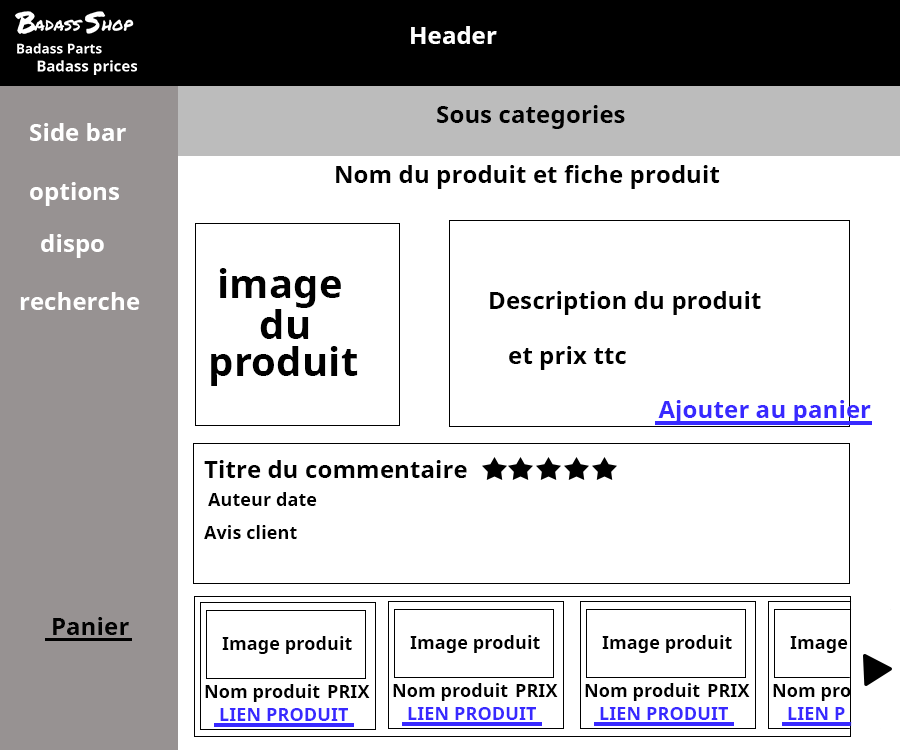
<style>
.page{position:relative;width:900px;height:750px;background:#ffffff}
.page>*{position:absolute;margin:0}
.t1{font:24px "NotoSans-Bold";letter-spacing:0.005em;color:#ffffff}
.t2{font:24px "NotoSans-Bold";letter-spacing:0.005em;color:#000000}
.t3{font:40px "NotoSans-Bold";letter-spacing:0.005em;color:#000000}
.t4{font:24px "NotoSans-Bold";letter-spacing:0.005em;color:#3829ff}
.t5{font:18px "NotoSans-Bold";letter-spacing:0.005em;color:#000000}
.t6{font:24px "NotoSans-Bold";letter-spacing:0.005em;color:#010101}
.t7{font:18px "NotoSans-Bold";letter-spacing:0.005em;color:#3829ff}
</style>
<div class="page">
<p class="t1" style="left:411px;top:26px;width:86px;height:18px">Header</p>
<p class="t2" style="left:437px;top:105px;width:188px;height:24px">Sous categories</p>
<p class="t1" style="left:30px;top:123px;width:96px;height:18px">Side bar</p>
<p class="t2" style="left:336px;top:165px;width:384px;height:24px">Nom du produit et fiche produit</p>
<p class="t1" style="left:30px;top:182px;width:89px;height:24px">options</p>
<p class="t1" style="left:41px;top:234px;width:63px;height:24px">dispo</p>
<p class="t3" style="left:219px;top:268px;width:122px;height:40px">image</p>
<p class="t2" style="left:490px;top:291px;width:271px;height:24px">Description du produit</p>
<p class="t3" style="left:260px;top:309px;width:49px;height:30px">du</p>
<p class="t3" style="left:211px;top:346px;width:147px;height:40px">produit</p>
<p class="t2" style="left:509px;top:346px;width:117px;height:24px">et prix ttc</p>
<p class="t4" style="left:658px;top:400px;width:213px;height:24px">Ajouter au panier</p>
<p class="t2" style="left:204px;top:460px;width:263px;height:18px">Titre du commentaire</p>
<p class="t5" style="left:208px;top:492px;width:109px;height:14px">Auteur date</p>
<p class="t5" style="left:204px;top:525px;width:93px;height:14px">Avis client</p>
<p class="t6" style="left:53px;top:617px;width:76px;height:18px">Panier</p>
<p class="t5" style="left:222px;top:636px;width:130px;height:18px">Image produit</p>
<p class="t5" style="left:410px;top:635px;width:130px;height:18px">Image produit</p>
<p class="t5" style="left:602px;top:635px;width:130px;height:18px">Image produit</p>
<p class="t5" style="left:790px;top:636px;width:58px;height:17px">Image</p>
<p class="t5" style="left:205px;top:684px;width:115px;height:18px">Nom produit</p>
<p class="t5" style="left:328px;top:685px;width:42px;height:13px">PRIX</p>
<p class="t5" style="left:393px;top:683px;width:115px;height:18px">Nom produit</p>
<p class="t5" style="left:516px;top:684px;width:42px;height:13px">PRIX</p>
<p class="t5" style="left:585px;top:683px;width:115px;height:18px">Nom produit</p>
<p class="t5" style="left:708px;top:684px;width:42px;height:13px">PRIX</p>
<p class="t5" style="left:773px;top:684px;width:78px;height:17px">Nom pro</p>
<p class="t7" style="left:220px;top:708px;width:128px;height:13px">LIEN PRODUIT</p>
<p class="t7" style="left:408px;top:707px;width:128px;height:13px">LIEN PRODUIT</p>
<p class="t7" style="left:600px;top:707px;width:128px;height:13px">LIEN PRODUIT</p>
<p class="t7" style="left:788px;top:707px;width:57px;height:13px">LIEN P</p>
</div>
